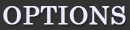
<style>
.page{position:relative;width:130px;height:30px;background:#333333}
.page>*{position:absolute;margin:0}
.t1{font:25px "Century";letter-spacing:0.01em;color:#ececff;font-weight:bold}
</style>
<div class="page">
<p class="t1" style="left:3px;top:6px;width:123px;height:19px">OPTIONS</p>
</div>
